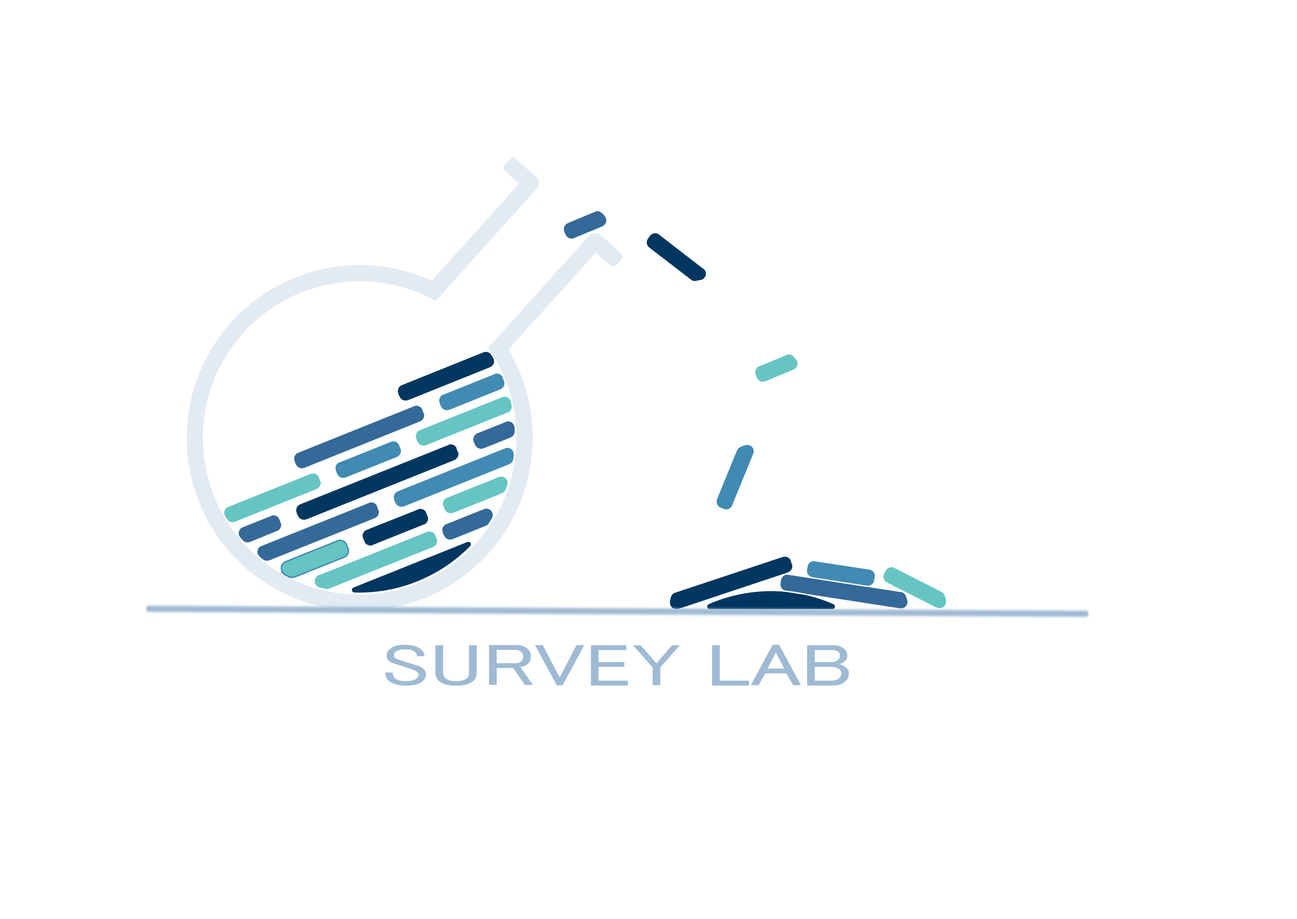
<style>
.page{position:relative;width:1297px;height:919px;background:#ffffff}
.page>*{position:absolute;margin:0}
.t1{font:59.8px "MS-PGothic";color:#9fbad3;scale:1.37 1}
</style>
<div class="page">
<p class="t1" style="left:385px;top:645px;width:464px;height:41px">SURVEY LAB</p>
</div>
